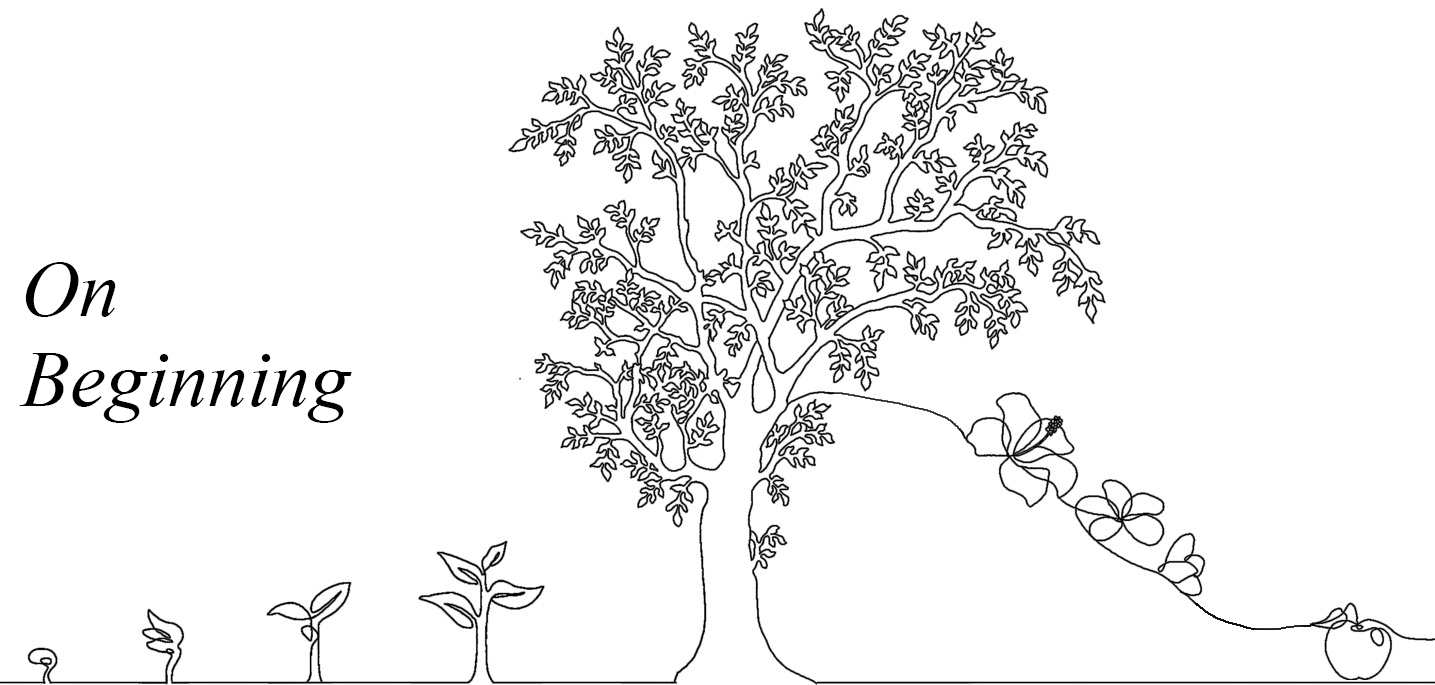
<style>
.page{position:relative;width:1435px;height:685px;background:#ffffff}
.page>*{position:absolute;margin:0}
.t1{font:80px/90px "TimesNewRomanPS-ItalicMT";color:#000000}
</style>
<div class="page">
<p class="t1" style="left:19px;top:262px;width:333px;height:161px">On <br>Beginning</p>
</div>
